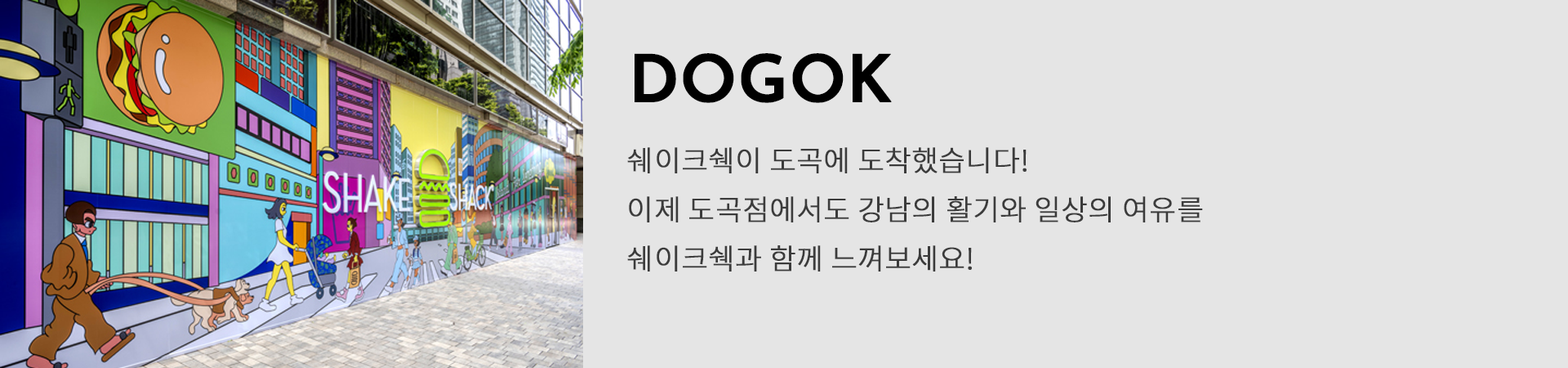
<style>
.page{position:relative;width:1568px;height:368px;background:#e5e5e5}
.page>*{position:absolute;margin:0}
.t1{font:65.3px "JosefinSans-SemiBold";color:#000000;font-weight:bold}
.t2{font:28.6px/49px "NotoSansKR-Light";color:#3b3b3b;font-weight:bold}
</style>
<div class="page">
<p class="t1" style="left:635px;top:53px;width:257px;height:50px">DOGOK</p>
<p class="t2" style="left:627px;top:147px;width:576px;height:124px">쉐이크쉑이 도곡에 도착했습니다!<br>이제 도곡점에서도 강남의 활기와 일상의 여유를<br>쉐이크쉑과 함께 느껴보세요!</p>
</div>
